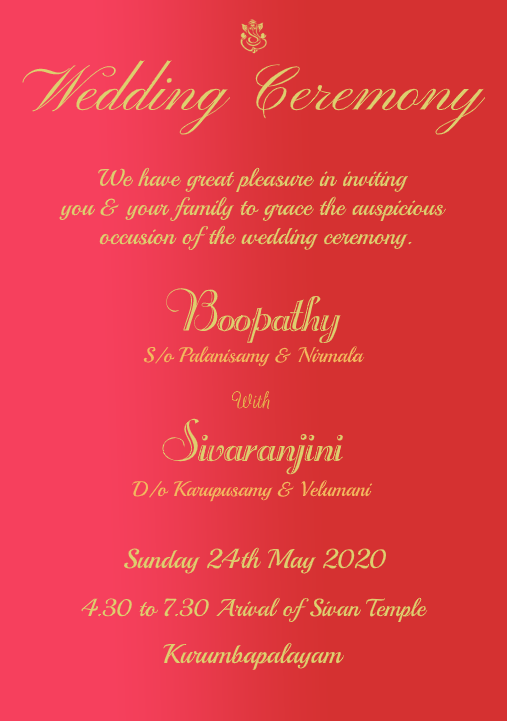
<style>
.page{position:relative;width:507px;height:721px;background:#d53131}
.page>*{position:absolute;margin:0}
.t1{font:63.7px "PinyonScript";color:#ddcf6e}
.t2{font:24.4px "Playball-Regular";color:#ddcf6e}
.t3{font:67.7px "Rechtman-Plain";color:#ddcf6e}
.t4{font:21px "Playball-Regular";color:#f2b95e}
.t5{font:25.7px "RougeScript-Regular";color:#e5b64e}
.t6{font:27.1px "Playball-Regular";color:#ddcf6e}
</style>
<div class="page">
<p class="t1" style="left:22px;top:60px;width:464px;height:75px">Wedding Ceremony</p>
<p class="t2" style="left:59px;top:167px;width:387px;height:83px;text-align:center">We have great pleasure in inviting <br>you &amp; your family to grace the auspicious <br>occusion of the wedding ceremony.</p>
<p class="t3" style="left:166px;top:288px;width:175px;height:55px">Boopathy</p>
<p class="t4" style="left:143px;top:346px;width:222px;height:21px">S/o Palanisamy &amp; Nirmala</p>
<p class="t5" style="left:232px;top:391px;width:38px;height:18px">With</p>
<p class="t3" style="left:162px;top:418px;width:181px;height:57px">Sivaranjini</p>
<p class="t4" style="left:132px;top:480px;width:241px;height:22px">D/o Karupusamy &amp; Velumani</p>
<p class="t6" style="left:124px;top:547px;width:262px;height:27px">Sunday 24th May 2020</p>
<p class="t2" style="left:81px;top:597px;width:347px;height:25px">4.30 to 7.30 Arival of Sivan Temple</p>
<p class="t6" style="left:163px;top:642px;width:181px;height:28px">Kurumbapalayam</p>
</div>
